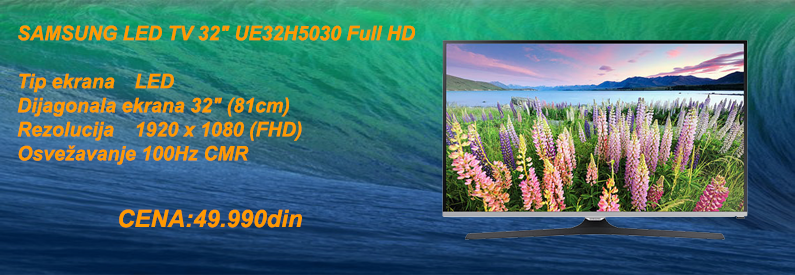
<style>
.page{position:relative;width:795px;height:275px}
.page>*{position:absolute;margin:0}
.t1{font:20px "Arial-BoldItalicMT";color:#ff9900}
.t2{font:24px "Arial-BoldItalicMT";color:#ff9900}
</style>
<div class="page">
<p class="t1" style="left:17px;top:25px;width:398px;height:140px">SAMSUNG LED TV 32" UE32H5030 Full HD<br><br>Tip ekrana  LED<br>Dijagonala ekrana 32" (81cm)<br>Rezolucija  1920 x 1080 (FHD)<br>Osvežavanje 100Hz CMR</p>
<p class="t2" style="left:119px;top:209px;width:183px;height:19px">CENA:49.990din</p>
</div>
